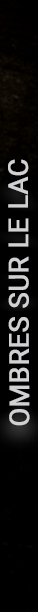
<style>
.page{position:relative;width:38px;height:612px;background:#000000}
.page>*{position:absolute;margin:0}
.t1{font:27px "Roboto-Regular";color:#d1d0d2;font-weight:bold}
</style>
<div class="page">
<p class="t1" style="left:8px;top:159px;width:22px;height:267px;rotate:-90deg">OMBRES SUR LE LAC</p>
</div>
